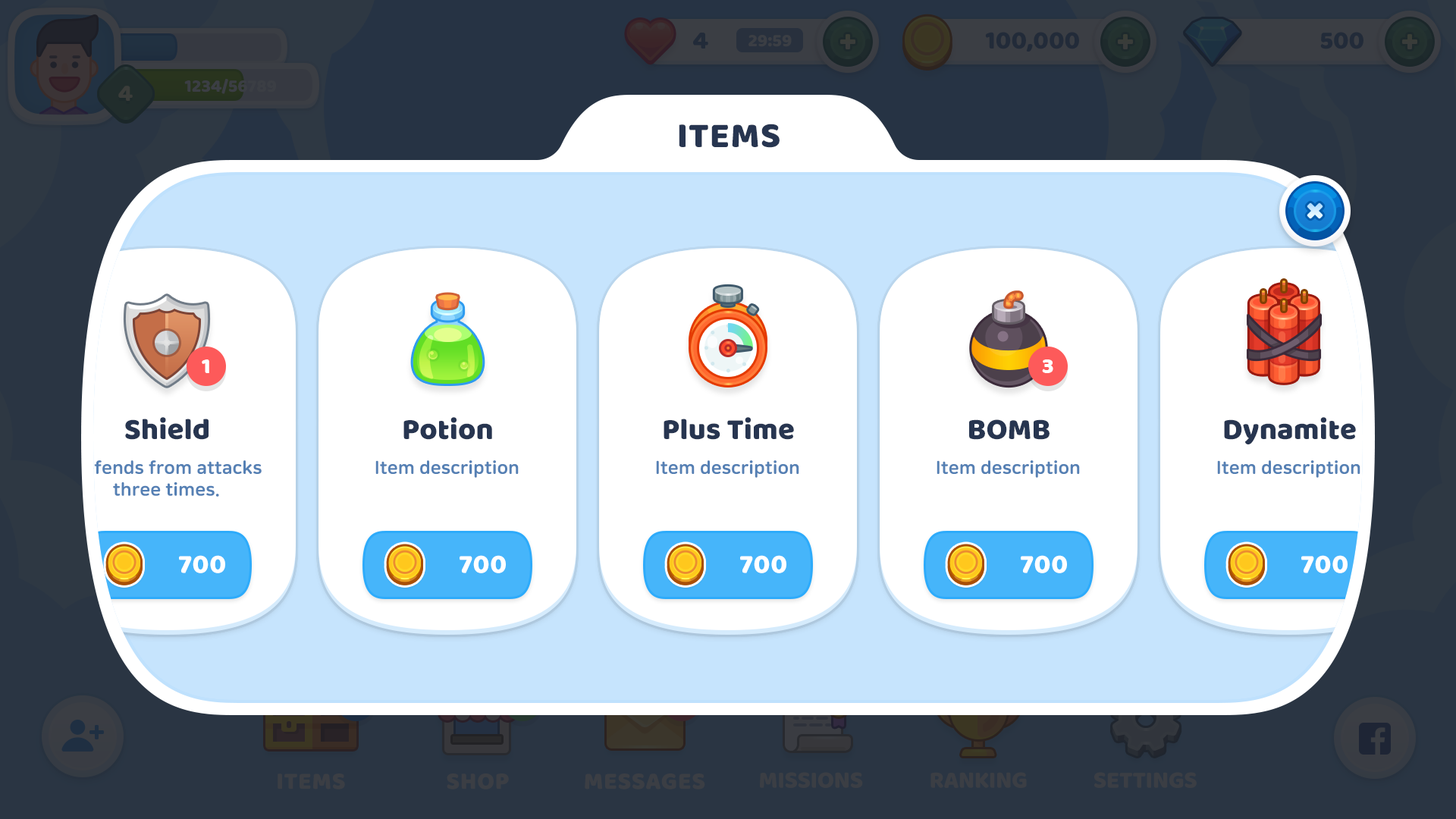
<style>
.page{position:relative;width:1456px;height:819px;background:#ffffff}
.page>*{position:absolute;margin:0}
.t1{font:36.4px "BalooBhaijaan-Regular";color:#273550;text-transform:uppercase}
.t2{font:22.7px "BalooBhaijaan-Regular";color:#ffffff}
.t3{font:30.3px "BalooBhaijaan-Regular";color:#273550}
.t4{font:18.2px "NanumSquareRoundOTFEB";color:#5580b4}
.t5{font:27.3px "BalooBhaijaan-Regular";color:#ffffff}
</style>
<div class="page">
<p class="t1" style="left:679px;top:124px;width:101px;height:24px">Items</p>
<p class="t2" style="left:202px;top:359px;width:7px;height:14px">1</p>
<p class="t2" style="left:1042px;top:359px;width:11px;height:14px">3</p>
<p class="t3" style="left:125px;top:417px;width:84px;height:23px">Shield</p>
<p class="t3" style="left:403px;top:417px;width:89px;height:23px">Potion</p>
<p class="t3" style="left:664px;top:417px;width:130px;height:23px">Plus Time</p>
<p class="t3" style="left:969px;top:419px;width:81px;height:21px">BOMB</p>
<p class="t3" style="left:1224px;top:417px;width:132px;height:27px">Dynamite</p>
<p class="t4" style="left:72px;top:460px;width:190px;height:37px;text-align:center">Defends from attacks<br>three times.</p>
<p class="t4" style="left:375px;top:460px;width:144px;height:18px">Item description</p>
<p class="t4" style="left:656px;top:460px;width:143px;height:18px">Item description</p>
<p class="t4" style="left:937px;top:460px;width:143px;height:18px">Item description</p>
<p class="t4" style="left:1217px;top:460px;width:143px;height:18px">Item description</p>
<p class="t5" style="left:179px;top:555px;width:46px;height:18px">700</p>
<p class="t5" style="left:460px;top:555px;width:46px;height:18px">700</p>
<p class="t5" style="left:740px;top:555px;width:46px;height:18px">700</p>
<p class="t5" style="left:1021px;top:555px;width:46px;height:18px">700</p>
<p class="t5" style="left:1301px;top:555px;width:47px;height:18px">700</p>
</div>
